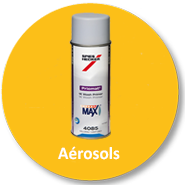
<style>
.page{position:relative;width:185px;height:185px;background:#fcbf18}
.page>*{position:absolute;margin:0}
.t1{font:17.8px "Calibri-Bold";color:#ffffff}
</style>
<div class="page">
<p class="t1" style="left:58px;top:146px;width:62px;height:14px">Aérosols</p>
</div>
